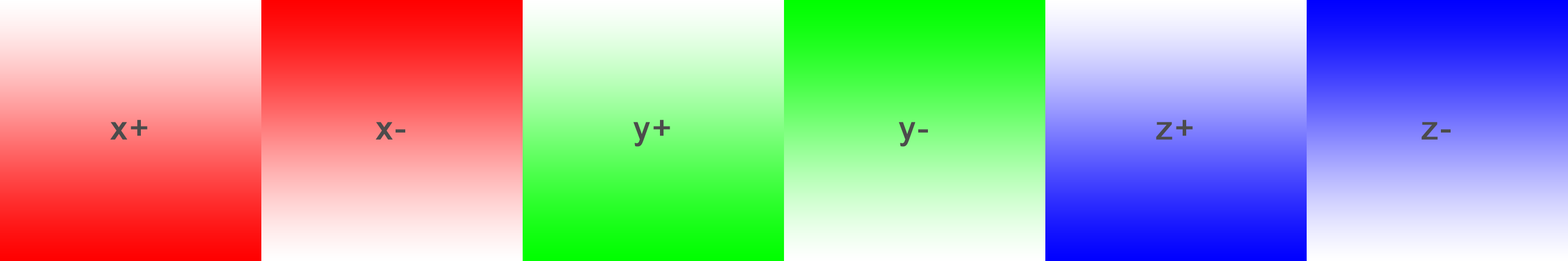
<style>
.page{position:relative;width:1568px;height:261px}
.page>*{position:absolute;margin:0}
.t1{font:32.7px "ArialMT";letter-spacing:0.06em;color:#4c4c4c;font-weight:bold}
</style>
<div class="page">
<p class="t1" style="left:110px;top:120px;width:38px;height:20px">x+</p>
<p class="t1" style="left:376px;top:122px;width:29px;height:18px">x-</p>
<p class="t1" style="left:633px;top:120px;width:37px;height:27px">y+</p>
<p class="t1" style="left:899px;top:122px;width:29px;height:25px">y-</p>
<p class="t1" style="left:1156px;top:120px;width:37px;height:20px">z+</p>
<p class="t1" style="left:1422px;top:122px;width:29px;height:18px">z-</p>
</div>
